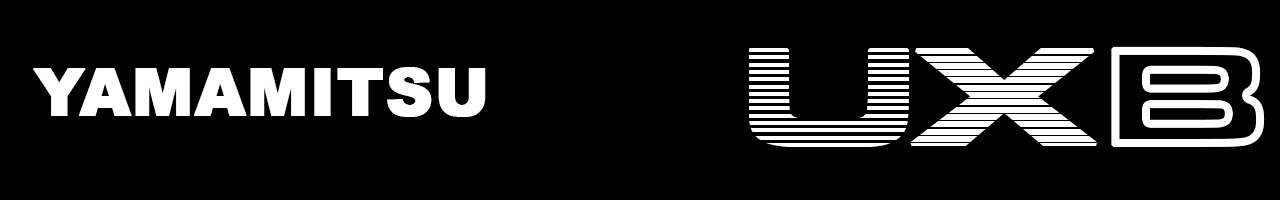
<style>
.page{position:relative;width:1280px;height:200px;background:#000000}
.page>*{position:absolute;margin:0}
.t1{font:140.4px "MicrogrammaExtD-Bol";font-weight:bold;scale:1.29 1}
.t2{font:140.4px "MicrogrammaExtD-Bol";color:#ffffff;font-weight:bold;scale:1.29 1}
.t3{font:144.5px "MicrogrammaExtD-Bol";font-weight:bold;scale:1.23 1}
.t4{font:65px "Arial-Black";color:#ffffff;font-weight:bold}
</style>
<div class="page">
<p class="t1" style="left:748px;top:48px;width:161px;height:100px">U</p>
<p class="t2" style="left:910px;top:48px;width:188px;height:98px">X</p>
<p class="t3" style="left:1111px;top:46px;width:154px;height:101px">B</p>
<p class="t4" style="left:33px;top:67px;width:453px;height:50px">YAMAMITSU</p>
</div>
